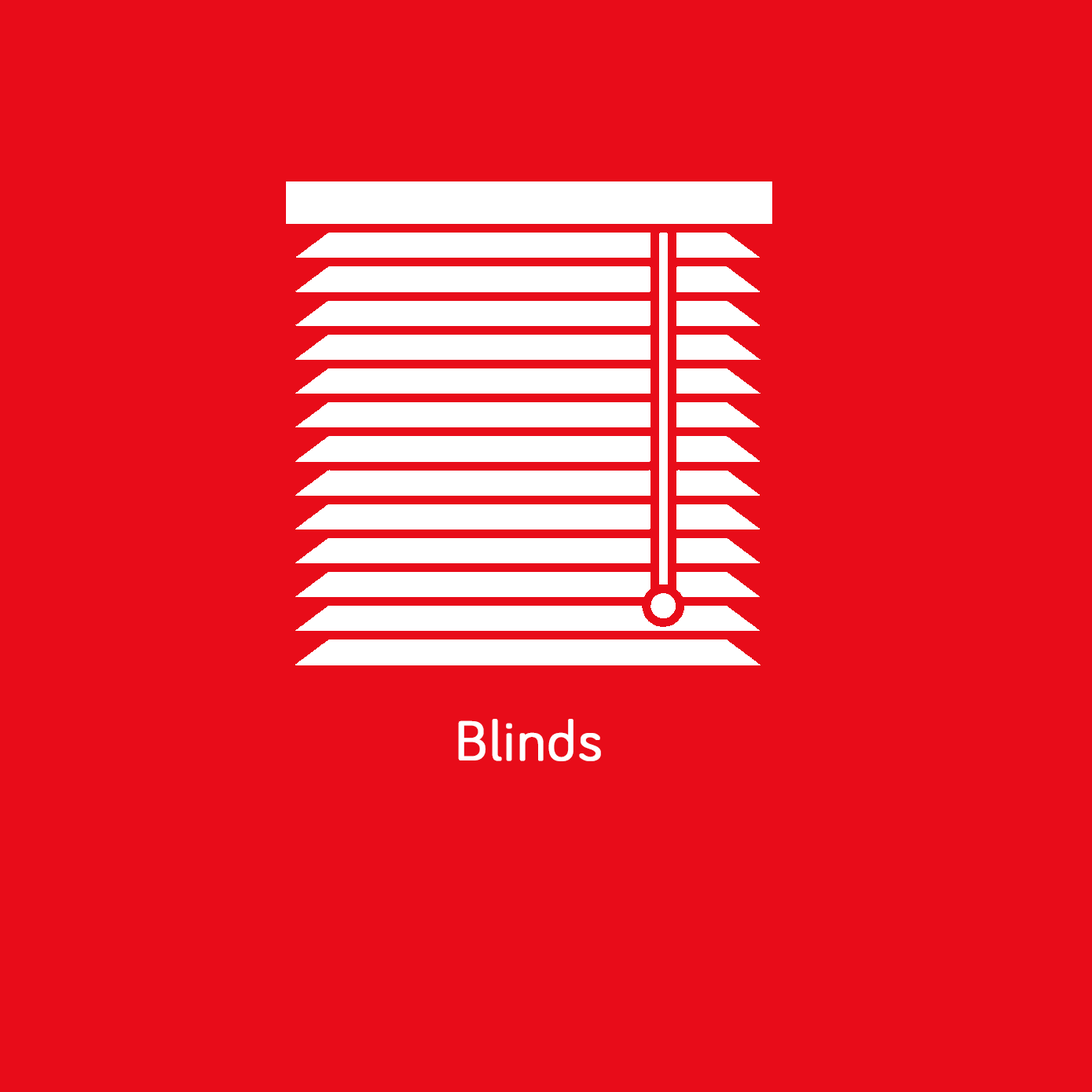
<style>
.page{position:relative;width:1092px;height:1092px;background:#e80c19}
.page>*{position:absolute;margin:0}
.t1{font:57.3px "Bariol-Regular";letter-spacing:0.01em;color:#ffffff;font-weight:bold}
</style>
<div class="page">
<p class="t1" style="left:458px;top:719px;width:143px;height:42px">Blinds</p>
</div>
